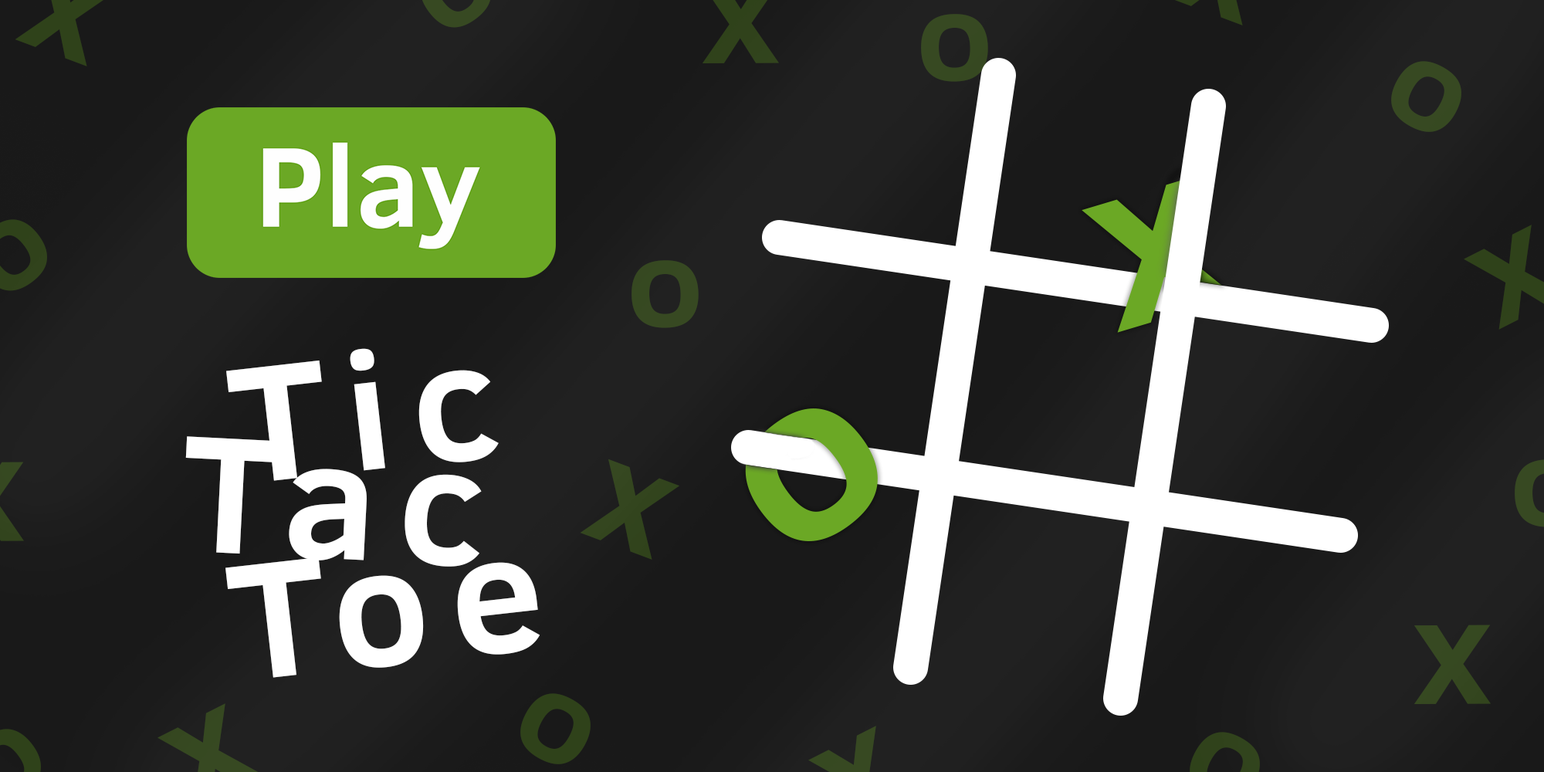
<style>
.page{position:relative;width:1544px;height:772px}
.page>*{position:absolute;margin:0}
.t1{font:124.4px "ClearSans-Bold";letter-spacing:0.12em;color:#374922;scale:1.09 1}
.t2{font:169.1px "ClearSans-Bold";letter-spacing:0.12em;color:#ffffff}
.t3{font:153.5px "ClearSans-Bold";letter-spacing:0.12em;color:#33451e}
.t4{font:153.5px "ClearSans-Bold";letter-spacing:0.12em;color:#364921}
.t5{font:124.4px "ClearSans-Bold";letter-spacing:0.12em;color:#2f421a;scale:1.09 1}
</style>
<div class="page">
<p class="t1" style="left:1391px;top:61px;width:71px;height:71px;rotate:28deg">o</p>
<p class="t1" style="left:632px;top:260px;width:67px;height:68px;rotate:-1deg">o</p>
<p class="t2" style="left:226px;top:348px;width:273px;height:133px;rotate:-6deg">Tic</p>
<p class="t2" style="left:185px;top:436px;width:297px;height:131px;rotate:3deg">Tac</p>
<p class="t3" style="left:580px;top:459px;width:99px;height:101px;rotate:21deg">x</p>
<p class="t2" style="left:225px;top:557px;width:316px;height:121px;rotate:-6deg">Toe</p>
<p class="t4" style="left:1415px;top:625px;width:76px;height:79px">x</p>
<p class="t5" style="left:520px;top:693px;width:71px;height:71px;rotate:28deg">o</p>
</div>
